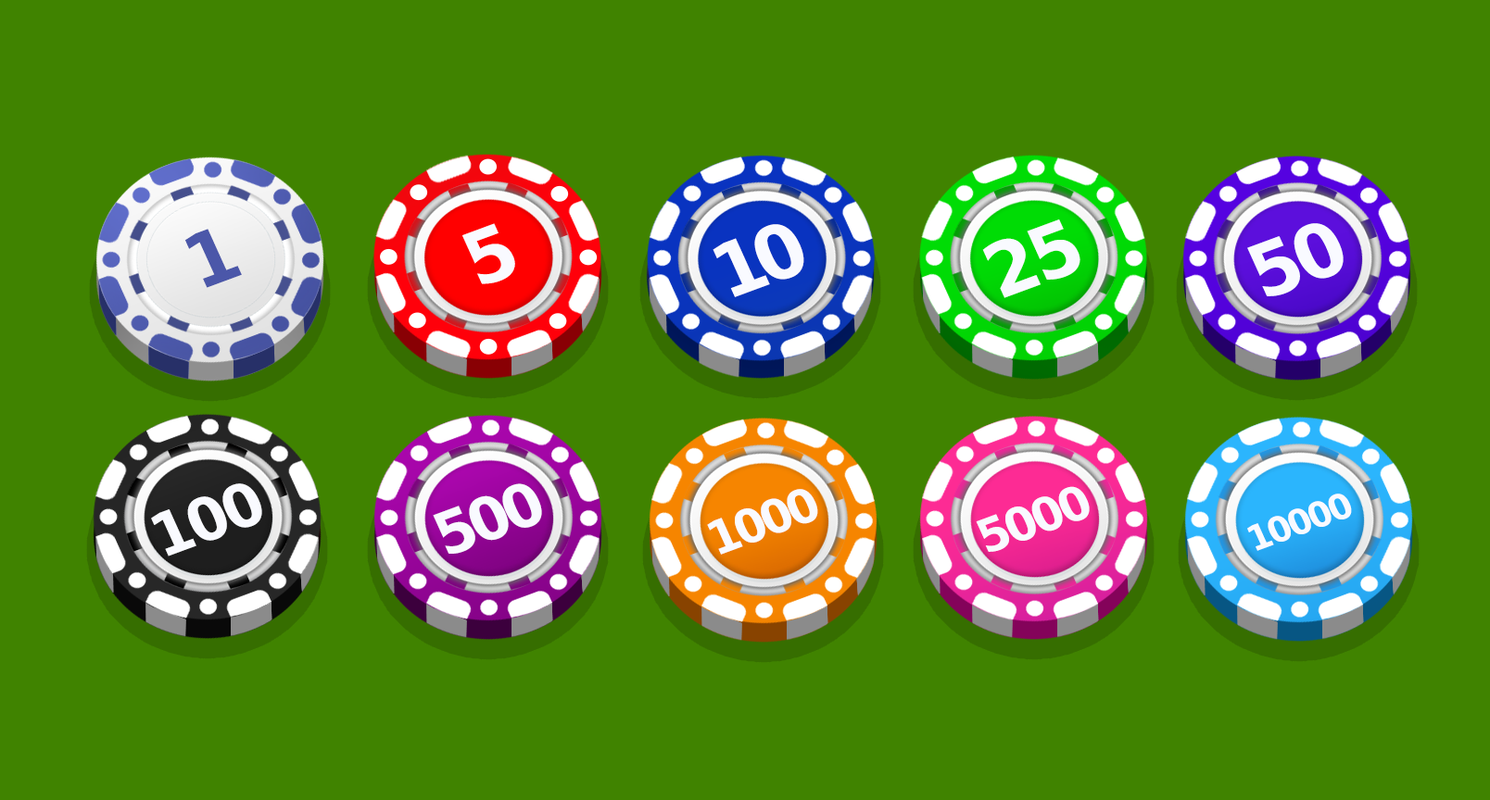
<style>
.page{position:relative;width:1490px;height:800px;background:#408300}
.page>*{position:absolute;margin:0}
.t1{font:75.1px "DejaVuSansCondensed-Bold";letter-spacing:-0.05em;color:#f9faff;text-transform:uppercase;scale:1.07 1}
.t2{font:75.1px "DejaVuSansCondensed-Bold";letter-spacing:-0.1em;color:#4b57a9;text-transform:uppercase;scale:1.07 1}
.t3{font:75.1px "DejaVuSansCondensed-Bold";letter-spacing:-0.1em;color:#f9faff;text-transform:uppercase;scale:1.07 1}
.t4{font:59.9px "DejaVuSansCondensed-Bold";letter-spacing:-0.05em;color:#f9faff;text-transform:uppercase;scale:1.07 1}
.t5{font:46.9px "DejaVuSansCondensed-Bold";letter-spacing:-0.05em;color:#f9faff;text-transform:uppercase;scale:1.07 1}
.t6{font:47px "DejaVuSansCondensed-Bold";letter-spacing:-0.05em;color:#f9faff;text-transform:uppercase;scale:1.07 1}
.t7{font:35.2px "DejaVuSansCondensed-Bold";letter-spacing:-0.05em;color:#f9faff;text-transform:uppercase;scale:1.07 1}
</style>
<div class="page">
<p class="t1" style="left:982px;top:220px;width:98px;height:78px;rotate:-20deg">25</p>
<p class="t2" style="left:184px;top:229px;width:58px;height:59px;rotate:-20deg">1</p>
<p class="t3" style="left:462px;top:223px;width:53px;height:61px;rotate:-20deg">5</p>
<p class="t3" style="left:712px;top:224px;width:92px;height:73px;rotate:-20deg">10</p>
<p class="t1" style="left:1247px;top:223px;width:96px;height:73px;rotate:-20deg">50</p>
<p class="t4" style="left:151px;top:484px;width:111px;height:73px;rotate:-20deg">100</p>
<p class="t4" style="left:433px;top:484px;width:109px;height:70px;rotate:-20deg">500</p>
<p class="t5" style="left:707px;top:489px;width:111px;height:66px;rotate:-20deg">1000</p>
<p class="t6" style="left:976px;top:486px;width:113px;height:66px;rotate:-20deg">5000</p>
<p class="t7" style="left:1247px;top:494px;width:105px;height:57px;rotate:-20deg">10000</p>
</div>
